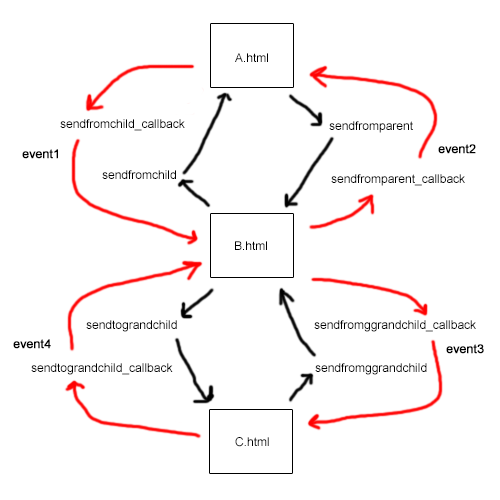
<style>
.page{position:relative;width:500px;height:500px;background:#ffffff}
.page>*{position:absolute;margin:0}
.t1{font:12px "ArialMT";color:#000000}
.t2{font:12px "ArialMT";color:#000000;font-weight:bold}
</style>
<div class="page">
<p class="t1" style="left:235px;top:53px;width:33px;height:9px">A.html</p>
<p class="t1" style="left:60px;top:119px;width:125px;height:12px">sendfromchild_callback</p>
<p class="t1" style="left:329px;top:121px;width:84px;height:12px">sendfromparent</p>
<p class="t2" style="left:22px;top:149px;width:36px;height:10px">event1</p>
<p class="t2" style="left:438px;top:144px;width:38px;height:10px">event2</p>
<p class="t1" style="left:102px;top:170px;width:74px;height:9px">sendfromchild</p>
<p class="t1" style="left:331px;top:174px;width:134px;height:12px">sendfromparent_callback</p>
<p class="t1" style="left:235px;top:241px;width:32px;height:9px">B.html</p>
<p class="t1" style="left:86px;top:320px;width:91px;height:12px">sendtograndchild</p>
<p class="t1" style="left:314px;top:320px;width:162px;height:12px">sendfromggrandchild_callback</p>
<p class="t2" style="left:13px;top:339px;width:38px;height:10px">event4</p>
<p class="t2" style="left:446px;top:344px;width:38px;height:10px">event3</p>
<p class="t1" style="left:31px;top:363px;width:142px;height:12px">sendtograndchild_callback</p>
<p class="t1" style="left:315px;top:363px;width:112px;height:12px">sendfromggrandchild</p>
<p class="t1" style="left:235px;top:437px;width:34px;height:10px">C.html</p>
</div>
